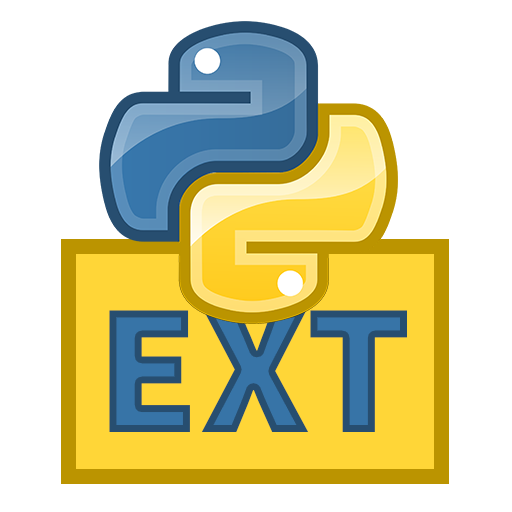
<style>
.page{position:relative;width:512px;height:512px;background:#ffffff}
.page>*{position:absolute;margin:0}
.t1{font:187.3px "SourceSansPro-Black"}
</style>
<div class="page">
<p class="t1" style="left:109px;top:310px;width:298px;height:122px">EXT</p>
</div>
